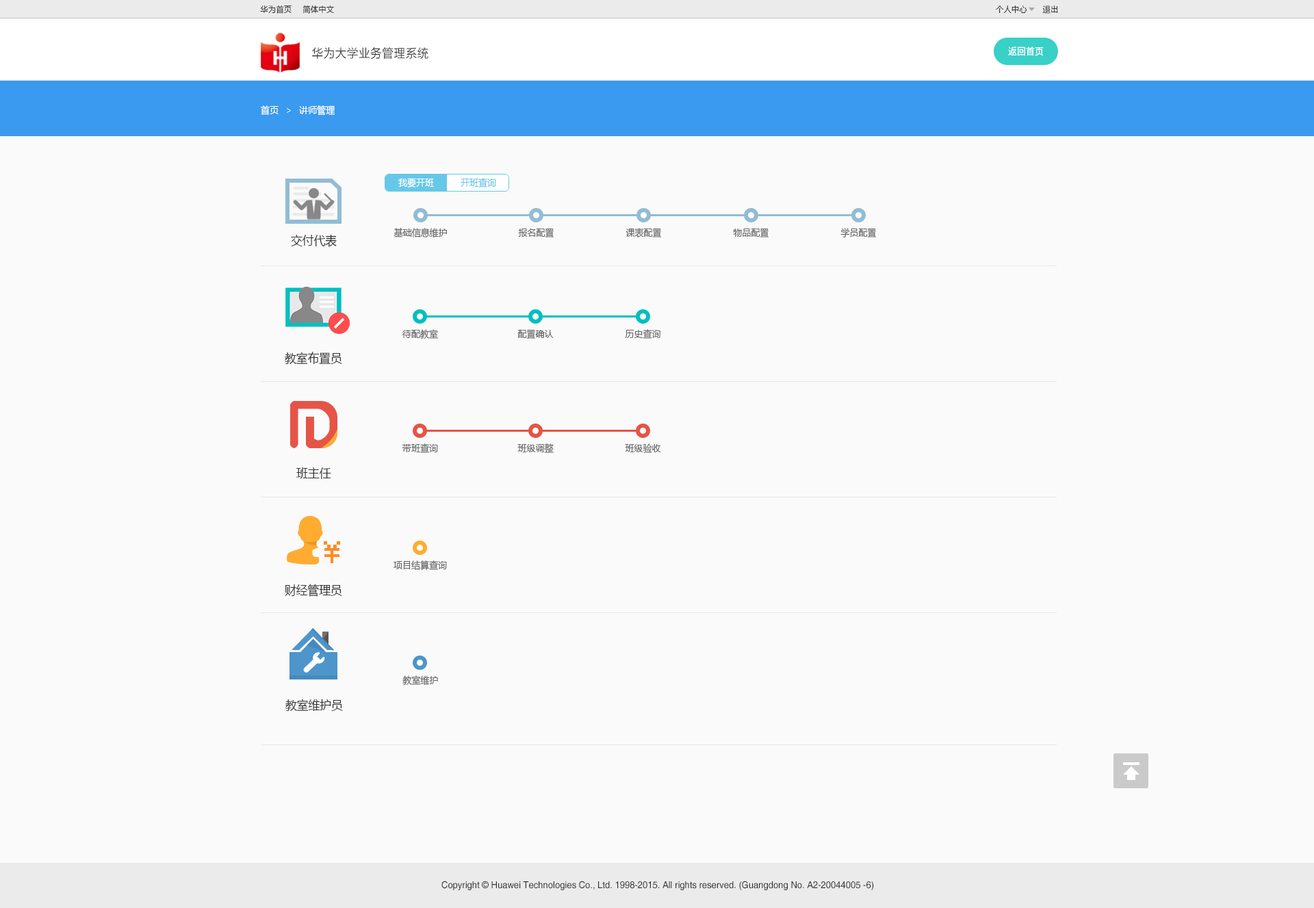
<style>
.page{position:relative;width:1314px;height:908px;background:#fafafa}
.page>*{position:absolute;margin:0}
.t1{font:8.2px "MicrosoftYaHei";letter-spacing:0.025em;color:#333333;scale:0.93 1}
.t2{font:12.3px "FZLTXHK";letter-spacing:0.025em;color:#333333;scale:0.93 1}
.t3{font:9.6px "SourceHanSansCN-Regular";color:#ffffff;scale:0.93 1}
.t4{font:9.6px "MicrosoftYaHei";color:#ffffff;scale:0.93 1}
.t5{font:9.6px "MicrosoftYaHei";color:#feffff;scale:0.93 1}
.t6{font:9.6px "MicrosoftYaHei";color:#66c7e8;scale:0.93 1}
.t7{font:12.3px "MicrosoftYaHei";color:#333333;scale:0.93 1}
.t8{font:9.6px "MicrosoftYaHei";color:#666666;scale:0.93 1}
.t9{font:9.6px "Helvetica";color:#333333;scale:0.93 1}
</style>
<div class="page">
<p class="t1" style="left:260px;top:5px;width:31px;height:9px">华为首页</p>
<p class="t1" style="left:302px;top:5px;width:32px;height:9px">简体中文</p>
<p class="t1" style="left:995px;top:5px;width:32px;height:8px">个人中心</p>
<p class="t1" style="left:1042px;top:5px;width:16px;height:9px">退出</p>
<p class="t2" style="left:312px;top:47px;width:116px;height:12px">华为大学业务管理系统</p>
<p class="t3" style="left:1008px;top:47px;width:35px;height:9px">返回首页</p>
<p class="t4" style="left:261px;top:105px;width:17px;height:10px">首页</p>
<p class="t4" style="left:299px;top:105px;width:36px;height:11px">讲师管理</p>
<p class="t5" style="left:398px;top:178px;width:36px;height:9px">我要开班</p>
<p class="t6" style="left:460px;top:178px;width:36px;height:9px">开班查询</p>
<p class="t7" style="left:291px;top:234px;width:46px;height:13px">交付代表</p>
<p class="t8" style="left:393px;top:228px;width:54px;height:10px">基础信息维护</p>
<p class="t8" style="left:518px;top:228px;width:36px;height:9px">报名配置</p>
<p class="t8" style="left:625px;top:228px;width:37px;height:9px">课表配置</p>
<p class="t8" style="left:733px;top:228px;width:36px;height:9px">物品配置</p>
<p class="t8" style="left:840px;top:228px;width:36px;height:9px">学员配置</p>
<p class="t8" style="left:402px;top:329px;width:36px;height:10px">待配教室</p>
<p class="t8" style="left:517px;top:329px;width:36px;height:10px">配置确认</p>
<p class="t8" style="left:625px;top:329px;width:35px;height:10px">历史查询</p>
<p class="t7" style="left:285px;top:352px;width:57px;height:12px">教室布置员</p>
<p class="t8" style="left:402px;top:443px;width:36px;height:10px">带班查询</p>
<p class="t8" style="left:517px;top:443px;width:36px;height:10px">班级调整</p>
<p class="t8" style="left:625px;top:443px;width:36px;height:10px">班级验收</p>
<p class="t7" style="left:296px;top:467px;width:35px;height:12px">班主任</p>
<p class="t8" style="left:393px;top:560px;width:54px;height:11px">项目结算查询</p>
<p class="t7" style="left:285px;top:584px;width:57px;height:13px">财经管理员</p>
<p class="t8" style="left:402px;top:675px;width:36px;height:10px">教室维护</p>
<p class="t7" style="left:285px;top:698px;width:58px;height:13px">教室维护员</p>
<p class="t9" style="left:441px;top:880px;width:433px;height:10px">Copyright © Huawei Technologies Co., Ltd. 1998-2015. All rights reserved. (Guangdong No. A2-20044005 -6)</p>
</div>
